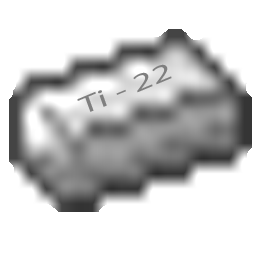
<style>
.page{position:relative;width:256px;height:256px;background:#ffffff}
.page>*{position:absolute;margin:0}
.t1{font:24.8px "MyriadPro-Regular";color:#7f7f7f;scale:1.58 1}
</style>
<div class="page">
<p class="t1" style="left:77px;top:64px;width:95px;height:48px;rotate:-23deg">Ti - 22</p>
</div>
